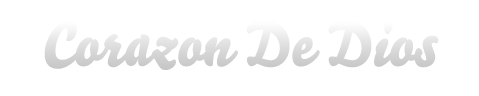
<style>
.page{position:relative;width:479px;height:96px;background:#ffffff}
.page>*{position:absolute;margin:0}
.t1{font:62.4px "Bello-Pro";color:#d9d9d9}
</style>
<div class="page">
<p class="t1" style="left:44px;top:20px;width:395px;height:50px">Corazon De Dios</p>
</div>
